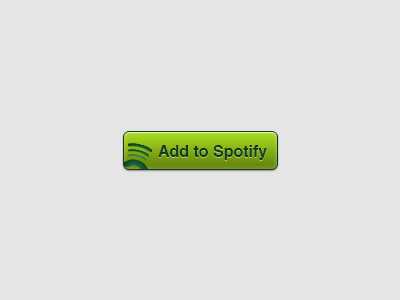
<style>
.page{position:relative;width:400px;height:300px;background:#e5e5e5}
.page>*{position:absolute;margin:0}
.t1{font:16px "Helvetica-Bold";color:#134724}
</style>
<div class="page">
<p class="t1" style="left:158px;top:145px;width:109px;height:15px">Add to Spotify</p>
</div>
